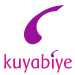
<style>
.page{position:relative;width:75px;height:75px;background:#ffffff}
.page>*{position:absolute;margin:0}
.t1{font:19.8px "BaarSophia";color:#d51289}
.t2{font:19.8px "MyriadPro-Regular";color:#d51289}
</style>
<div class="page">
<p class="t1" style="left:4px;top:54px;width:68px;height:19px">kuyab<span class="t2">ı</span>ye</p>
</div>
